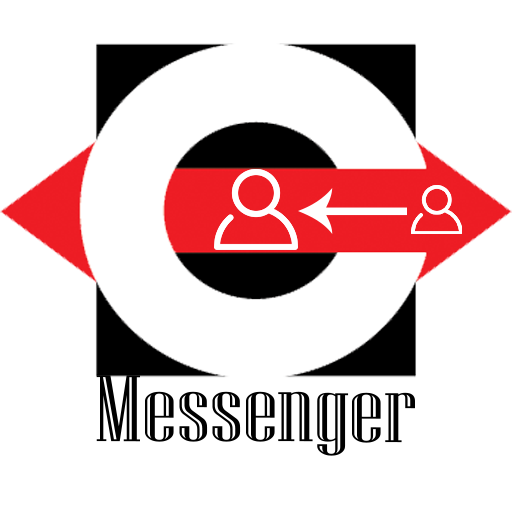
<style>
.page{position:relative;width:512px;height:512px;background:#ffffff}
.page>*{position:absolute;margin:0}
.t1{font:94px "NiagaraEngraved-Reg";color:#000000;scale:1.34 1}
</style>
<div class="page">
<p class="t1" style="left:96px;top:375px;width:319px;height:81px">Messenger</p>
</div>
